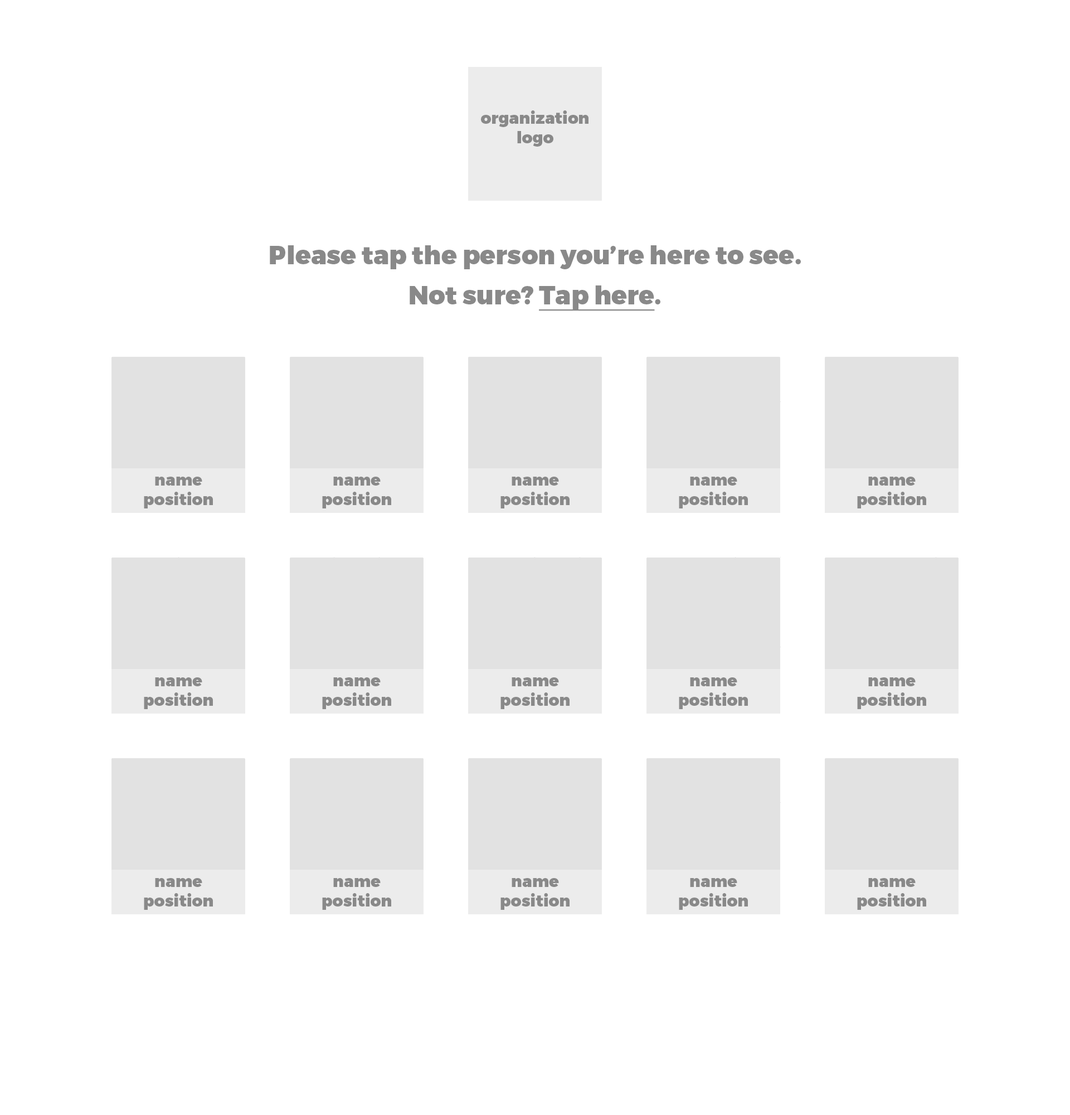
<style>
.page{position:relative;width:1070px;height:1115px;background:#ffffff}
.page>*{position:absolute;margin:0}
.t1{font:16.3px "Montserrat-Black";color:#898989}
.t2{font:25.5px "Montserrat-Black";color:#898989}
.t3{font:25.5px "Montserrat-Black";color:#898989;text-decoration:underline}
</style>
<div class="page">
<p class="t1" style="left:481px;top:110px;width:107px;height:37px;text-align:center">organization logo</p>
<p class="t2" style="left:270px;top:245px;width:531px;height:24px">Please tap the person you’re here to see.</p>
<p class="t2" style="left:410px;top:285px;width:250px;height:26px">Not sure? <span class="t3">Tap here</span>.</p>
<p class="t1" style="left:144px;top:476px;width:69px;height:32px;text-align:center">name<br>position</p>
<p class="t1" style="left:322px;top:476px;width:69px;height:32px;text-align:center">name<br>position</p>
<p class="t1" style="left:500px;top:476px;width:70px;height:32px;text-align:center">name<br>position</p>
<p class="t1" style="left:679px;top:476px;width:69px;height:32px;text-align:center">name<br>position</p>
<p class="t1" style="left:857px;top:476px;width:69px;height:32px;text-align:center">name<br>position</p>
<p class="t1" style="left:144px;top:677px;width:69px;height:32px;text-align:center">name<br>position</p>
<p class="t1" style="left:322px;top:677px;width:69px;height:32px;text-align:center">name<br>position</p>
<p class="t1" style="left:500px;top:677px;width:70px;height:32px;text-align:center">name<br>position</p>
<p class="t1" style="left:679px;top:677px;width:69px;height:32px;text-align:center">name<br>position</p>
<p class="t1" style="left:857px;top:677px;width:69px;height:32px;text-align:center">name<br>position</p>
<p class="t1" style="left:144px;top:878px;width:69px;height:31px;text-align:center">name<br>position</p>
<p class="t1" style="left:322px;top:878px;width:69px;height:31px;text-align:center">name<br>position</p>
<p class="t1" style="left:500px;top:878px;width:70px;height:31px;text-align:center">name<br>position</p>
<p class="t1" style="left:679px;top:878px;width:69px;height:31px;text-align:center">name<br>position</p>
<p class="t1" style="left:857px;top:878px;width:69px;height:31px;text-align:center">name<br>position</p>
</div>
